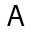
<style>
.page{position:relative;width:32px;height:32px;background:#ffffff}
.page>*{position:absolute;margin:0}
.t1{font:31.1px "MyriadPro-Regular";color:#000000}
</style>
<div class="page">
<p class="t1" style="left:7px;top:5px;width:18px;height:21px">A</p>
</div>
